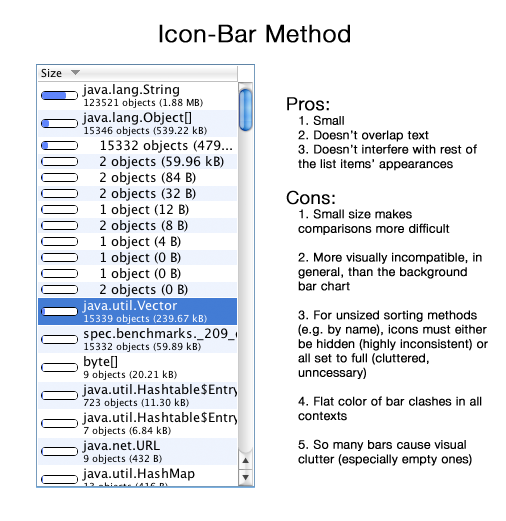
<style>
.page{position:relative;width:506px;height:521px;background:#ffffff}
.page>*{position:absolute;margin:0}
.t1{font:24px "HelveticaNeue-Light";letter-spacing:0.025em;color:#000000;font-weight:bold}
.t2{font:12px "HelveticaNeue-Light";letter-spacing:0.025em;color:#000000;font-weight:bold}
.t3{font:18px "HelveticaNeue-Light";letter-spacing:0.025em;color:#000000;font-weight:bold}
</style>
<div class="page">
<p class="t1" style="left:159px;top:24px;width:191px;height:19px">Icon-Bar Method</p>
<p class="t2" style="left:286px;top:97px;width:202px;height:369px"><span class="t3">Pros:<br></span>1. Small<br>2. Doesn’t overlap text<br>3. Doesn’t interfere with rest of the list items’ appearances<br><br><span class="t3">Cons:<br></span>1. Small size makes comparisons more difficult<br><br>2. More visually incompatible, in general, than the background bar chart<br><br>3. For unsized sorting methods (e.g. by name), icons must either be hidden (highly inconsistent) or all set to full (cluttered, unncessary)<br><br>4. Flat color of bar clashes in all contexts<br><br>5. So many bars cause visual clutter (especially empty ones)</p>
</div>
